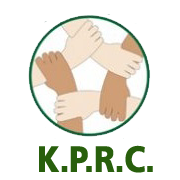
<style>
.page{position:relative;width:180px;height:180px;background:#ffffff}
.page>*{position:absolute;margin:0}
.t1{font:36.7px "ArticulateExtrabold";color:#285f0c;scale:0.85 1}
</style>
<div class="page">
<p class="t1" style="left:39px;top:145px;width:114px;height:28px">K.P.R.C.</p>
</div>
